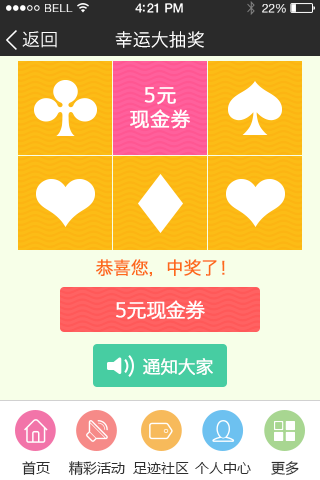
<style>
.page{position:relative;width:320px;height:480px;background:#f7ffe8}
.page>*{position:absolute;margin:0}
.t1{font:11.9px "HelveticaNeue";letter-spacing:0.02em;color:#ffffff;scale:0.97 1}
.t2{font:13px "HelveticaNeue-Medium";letter-spacing:-0.02em;color:#ffffff;scale:0.97 1}
.t3{font:12.4px "HelveticaNeue";letter-spacing:-0.02em;color:#ffffff;scale:0.97 1}
.t4{font:18px "HiraginoSansGB-W3";color:#ffffff}
.t5{font:18px "STHeitiSC-Light";color:#ffffff}
.t6{font:20px "STHeitiSC-Light";color:#ffffff;font-weight:bold}
.t7{font:18px "STHeitiSC-Light";letter-spacing:-0.05em;color:#fd6a1a;font-weight:bold}
.t8{font:20px "STHeitiSC-Light";letter-spacing:-0.05em;color:#ffffff;font-weight:bold}
.t9{font:18px "STHeitiSC-Light";letter-spacing:-0.05em;color:#ffffff;font-weight:bold}
.t10{font:14px "MicrosoftYaHei";color:#2d2d2d}
</style>
<div class="page">
<p class="t1" style="left:45px;top:4px;width:28px;height:8px">BELL</p>
<p class="t2" style="left:135px;top:3px;width:48px;height:10px">4:21 PM</p>
<p class="t3" style="left:262px;top:4px;width:24px;height:9px">22%</p>
<p class="t4" style="left:22px;top:31px;width:35px;height:17px">返回</p>
<p class="t5" style="left:115px;top:31px;width:89px;height:17px">幸运大抽奖</p>
<p class="t6" style="left:130px;top:87px;width:60px;height:42px;text-align:center">5元<br>现金券</p>
<p class="t7" style="left:96px;top:259px;width:129px;height:18px">恭喜您，中奖了！</p>
<p class="t8" style="left:116px;top:300px;width:89px;height:20px">5元现金券</p>
<p class="t9" style="left:143px;top:358px;width:70px;height:17px">通知大家</p>
<p class="t10" style="left:22px;top:461px;width:28px;height:14px">首页</p>
<p class="t10" style="left:68px;top:461px;width:57px;height:15px">精彩活动</p>
<p class="t10" style="left:133px;top:462px;width:56px;height:12px">足迹社区</p>
<p class="t10" style="left:195px;top:462px;width:56px;height:12px">个人中心</p>
<p class="t10" style="left:271px;top:461px;width:28px;height:15px">更多</p>
</div>
